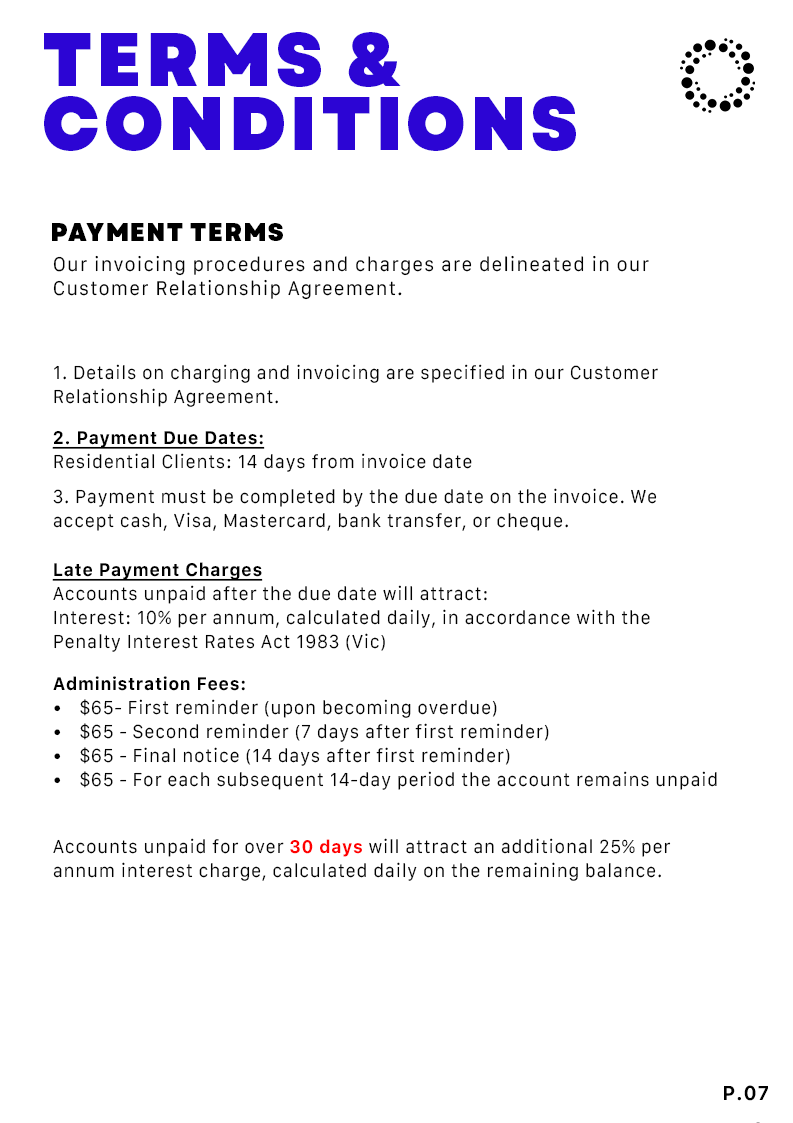
<style>
.page{position:relative;width:793px;height:1123px;background:#ffffff}
.page>*{position:absolute;margin:0}
.t1{font:75px/64px "Garet-Heavy";letter-spacing:0.06em;color:#2c05d4;text-transform:uppercase;scale:0.96 1}
.t2{font:25px "Garet-Heavy";letter-spacing:0.06em;color:#000000;scale:0.96 1}
.t3{font:19px/24px "Galvji";letter-spacing:0.06em;color:#000000;scale:0.96 1}
.t4{font:18px/24px "Galvji";letter-spacing:0.04em;color:#000000;scale:0.96 1}
.t5{font:18px/24px "Galvji-Bold";letter-spacing:0.04em;color:#000000;text-decoration:underline;scale:0.96 1}
.t6{font:18px/24px "Galvji-Bold";letter-spacing:0.04em;color:#000000;scale:0.96 1}
.t7{font:18px/24px "Galvji-Bold";letter-spacing:0.04em;color:#ff0000;scale:0.96 1}
.t8{font:20px "Galvji-Bold";letter-spacing:0.04em;color:#000000;scale:0.96 1}
</style>
<div class="page">
<p class="t1" style="left:44px;top:32px;width:532px;height:119px">TERMS &amp;<br>CONDITIONS</p>
<p class="t2" style="left:52px;top:223px;width:231px;height:18px">PAYMENT TERMS</p>
<p class="t3" style="left:53px;top:255px;width:596px;height:45px">Our invoicing procedures and charges are delineated in our Customer Relationship Agreement.</p>
<p class="t4" style="left:54px;top:364px;width:604px;height:43px">1. Details on charging and invoicing are specified in our Customer Relationship Agreement.</p>
<p class="t4" style="left:52px;top:431px;width:420px;height:41px"><span class="t5">2. Payment Due Dates:<br></span>Residential Clients: 14 days from invoice date</p>
<p class="t4" style="left:53px;top:488px;width:604px;height:43px">3. Payment must be completed by the due date on the invoice. We accept cash, Visa, Mastercard, bank transfer, or cheque.</p>
<p class="t4" style="left:52px;top:562px;width:598px;height:90px"><span class="t5">Late Payment Charges<br></span>Accounts unpaid after the due date will attract:<br>Interest: 10% per annum, calculated daily, in accordance with the Penalty Interest Rates Act 1983 (Vic)</p>
<p class="t4" style="left:53px;top:676px;width:664px;height:114px"><span class="t6">Administration Fees:<br></span>$65- First reminder (upon becoming overdue)<br>$65 - Second reminder (7 days after first reminder)<br>$65 - Final notice (14 days after first reminder)<br>$65 - For each subsequent 14-day period the account remains unpaid</p>
<p class="t4" style="left:53px;top:838px;width:618px;height:43px">Accounts unpaid for over <span class="t7">30 days</span> will attract an additional 25% per annum interest charge, calculated daily on the remaining balance.</p>
<p class="t8" style="left:724px;top:1085px;width:44px;height:16px">P.07</p>
</div>
